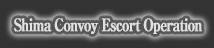
<style>
.page{position:relative;width:214px;height:48px;background:#333333}
.page>*{position:absolute;margin:0}
.t1{font:17px "RyuminPro-ExBold";letter-spacing:-0.08em;color:#d9d9d9;font-weight:bold;scale:0.8 1}
</style>
<div class="page">
<p class="t1" style="left:14px;top:18px;width:188px;height:16px">Shima Convoy Escort Operation</p>
</div>
